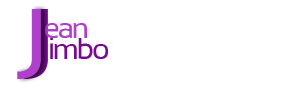
<style>
.page{position:relative;width:300px;height:100px;background:#ffffff}
.page>*{position:absolute;margin:0}
.t1{font:100px "Sansation";color:#b13fcd}
.t2{font:100px "Sansation"}
.t3{font:30px "Sansation";letter-spacing:-0.08em;color:#b13fcd}
.t4{font:30px "Sansation";letter-spacing:-0.08em;color:#760991}
</style>
<div class="page">
<p class="t1" style="left:17px;top:9px;width:24px;height:70px">J</p>
<p class="t2" style="left:24px;top:9px;width:24px;height:70px">J</p>
<p class="t3" style="left:45px;top:23px;width:42px;height:15px">ean</p>
<p class="t4" style="left:50px;top:38px;width:59px;height:21px">imbo</p>
</div>
